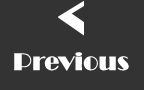
<style>
.page{position:relative;width:144px;height:90px;background:#333333}
.page>*{position:absolute;margin:0}
.t1{font:25px "Broadway";color:#ffffff}
.t2{font:60px "Broadway";color:#ffffff}
</style>
<div class="page">
<p class="t1" style="left:14px;top:1px;width:115px;height:70px;text-align:center"><span class="t2">&lt;<br></span>Previous</p>
</div>
